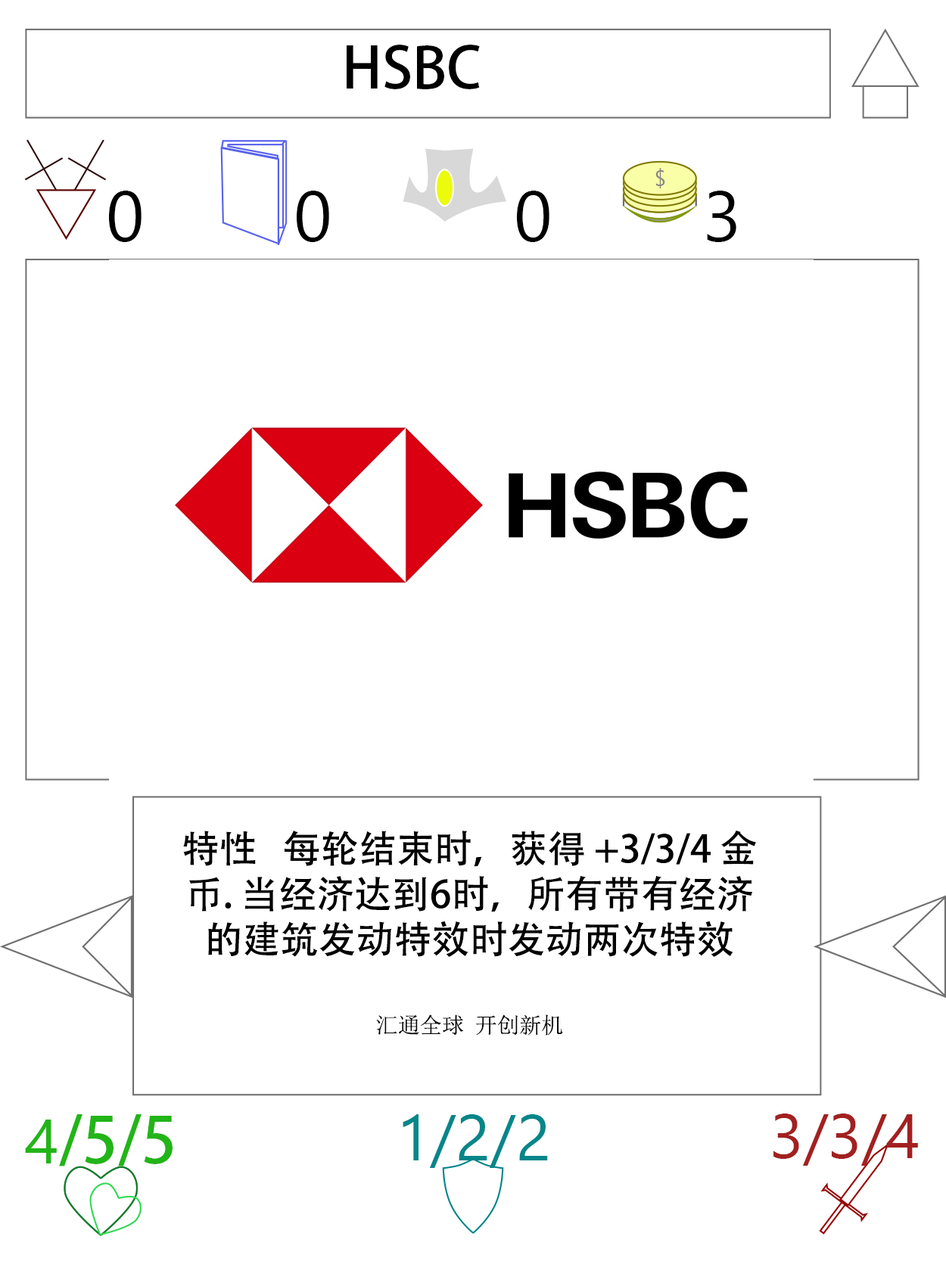
<style>
.page{position:relative;width:946px;height:1261px;background:#ffffff}
.page>*{position:absolute;margin:0}
.t1{font:56.7px "AdobeHeitiStd-Regular";color:#000000}
.t2{font:70.9px "SegoeUI";color:#000000}
.t3{font:37.8px "AdobeHeitiStd-Regular";color:#000000}
.t4{font:22.1px "SimSun";color:#000000}
.t5{font:63px "AdobeHeitiStd-Regular";color:#22b518}
.t6{font:63px "SegoeUI";color:#22b518}
.t7{font:64.6px "SegoeUI";color:#05868a}
.t8{font:63px "SegoeUI";color:#a32020}
</style>
<div class="page">
<p class="t1" style="left:346px;top:45px;width:134px;height:44px">HSBC</p>
<p class="t2" style="left:109px;top:191px;width:32px;height:51px">0</p>
<p class="t2" style="left:297px;top:191px;width:32px;height:51px">0</p>
<p class="t2" style="left:517px;top:191px;width:32px;height:51px">0</p>
<p class="t2" style="left:707px;top:191px;width:29px;height:51px">3</p>
<p class="t3" style="left:183px;top:830px;width:573px;height:206px;text-align:center">特性   每轮结束时，获得 +3/3/4 金币. 当经济达到6时，所有带有经济的建筑发动特效时发动两次特效<br><br><span class="t4"><br>汇通全球 开创新机</span></p>
<p class="t5" style="left:25px;top:1114px;width:147px;height:52px"><span class="t6">4</span>/5/5</p>
<p class="t7" style="left:402px;top:1114px;width:146px;height:54px">1/2/2</p>
<p class="t8" style="left:773px;top:1114px;width:145px;height:52px">3/3/4</p>
</div>
